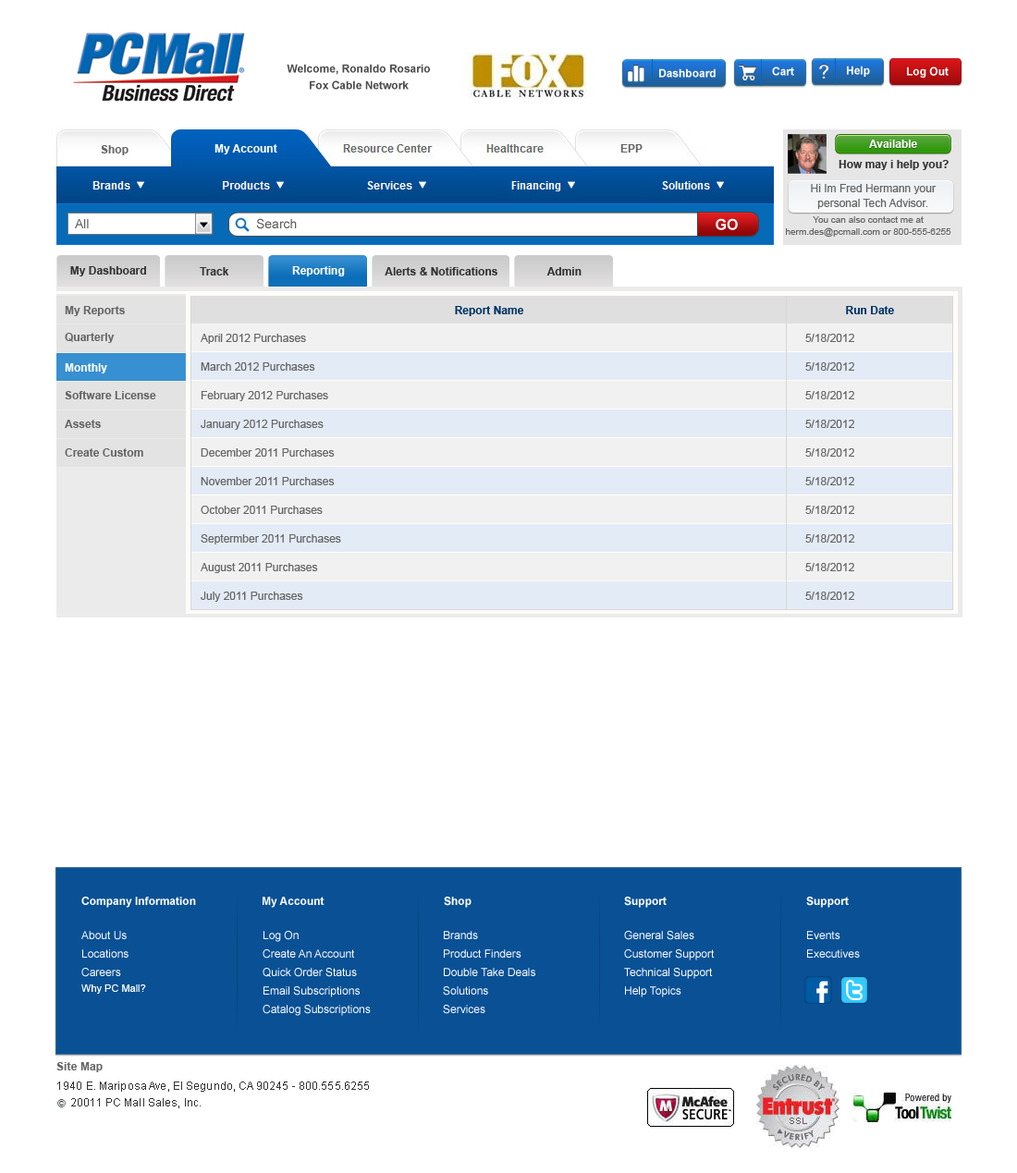
<style>
.page{position:relative;width:1017px;height:1173px;background:#ffffff}
.page>*{position:absolute;margin:0}
.t1{font:11.1px/16.6px "Arial-BoldMT";color:#4e4e4e}
.t2{font:11.1px "Arial-BoldMT";color:#feffff}
.t3{font:11.1px "Arial-BoldMT";color:#fffefe}
.t4{font:11.1px "Arial-BoldMT";color:#333333}
.t5{font:11.1px/14.8px "ArialMT";color:#666666}
.t6{font:12.9px "ArialMT";color:#625f5f}
.t7{font:14.8px "Arial-BoldMT";color:#ffffff}
.t8{font:9.2px/12px "ArialMT";color:#666666}
.t9{font:11.1px "Arial-BoldMT";color:#ffffff}
.t10{font:11.1px "Arial-BoldMT";color:#003366}
.t11{font:11.1px "ArialMT";color:#666666}
.t12{font:11.1px/18.5px "ArialMT";color:#ffffff}
.t13{font:10.2px "ArialMT";color:#ffffff}
.t14{font:11.1px "Arial-BoldMT";letter-spacing:0.01em;color:#666666}
.t15{font:11.1px "ArialMT";letter-spacing:0.01em;color:#333333}
</style>
<div class="page">
<p class="t1" style="left:287px;top:64px;width:143px;height:26px;text-align:center">Welcome, Ronaldo Rosario <br>Fox Cable Network</p>
<p class="t2" style="left:847px;top:66px;width:23px;height:11px">Help</p>
<p class="t2" style="left:659px;top:68px;width:56px;height:10px">Dashboard</p>
<p class="t2" style="left:772px;top:67px;width:22px;height:9px">Cart</p>
<p class="t2" style="left:907px;top:67px;width:41px;height:11px">Log Out</p>
<p class="t3" style="left:869px;top:140px;width:48px;height:8px">Available</p>
<p class="t4" style="left:838px;top:160px;width:110px;height:10px">How may i help you?</p>
<p class="t5" style="left:811px;top:184px;width:125px;height:25px;text-align:center">Hi Im Fred Hermann your personal Tech Advisor.</p>
<p class="t6" style="left:75px;top:219px;width:14px;height:9px">All</p>
<p class="t6" style="left:256px;top:218px;width:41px;height:11px">Search</p>
<p class="t7" style="left:715px;top:218px;width:23px;height:12px">GOv</p>
<p class="t8" style="left:786px;top:216px;width:165px;height:22px;text-align:center">You can also contact me at herm.des@pcmall.com or 800-555-6255</p>
<p class="t4" style="left:70px;top:266px;width:76px;height:10px">My Dashboard</p>
<p class="t4" style="left:200px;top:267px;width:29px;height:8px">Track</p>
<p class="t9" style="left:292px;top:266px;width:53px;height:10px">Reporting</p>
<p class="t4" style="left:384px;top:267px;width:113px;height:8px">Alerts &amp; Notifications</p>
<p class="t4" style="left:546px;top:267px;width:35px;height:8px">Admin</p>
<p class="t10" style="left:455px;top:306px;width:69px;height:10px">Report Name</p>
<p class="t10" style="left:846px;top:306px;width:48px;height:8px">Run Date</p>
<p class="t11" style="left:201px;top:334px;width:105px;height:10px">April 2012 Purchases</p>
<p class="t11" style="left:805px;top:334px;width:49px;height:8px">5/18/2012</p>
<p class="t11" style="left:201px;top:362px;width:114px;height:9px">March 2012 Purchases</p>
<p class="t11" style="left:805px;top:362px;width:49px;height:9px">5/18/2012</p>
<p class="t11" style="left:201px;top:391px;width:127px;height:10px">February 2012 Purchases</p>
<p class="t11" style="left:805px;top:391px;width:49px;height:8px">5/18/2012</p>
<p class="t11" style="left:201px;top:420px;width:122px;height:10px">January 2012 Purchases</p>
<p class="t11" style="left:805px;top:420px;width:49px;height:8px">5/18/2012</p>
<p class="t11" style="left:201px;top:448px;width:134px;height:9px">December 2011 Purchases</p>
<p class="t11" style="left:805px;top:448px;width:49px;height:9px">5/18/2012</p>
<p class="t11" style="left:201px;top:477px;width:134px;height:8px">November 2011 Purchases</p>
<p class="t11" style="left:805px;top:477px;width:49px;height:8px">5/18/2012</p>
<p class="t11" style="left:201px;top:506px;width:122px;height:8px">October 2011 Purchases</p>
<p class="t11" style="left:805px;top:506px;width:49px;height:8px">5/18/2012</p>
<p class="t11" style="left:201px;top:534px;width:140px;height:10px">Septermber 2011 Purchases</p>
<p class="t11" style="left:805px;top:534px;width:49px;height:9px">5/18/2012</p>
<p class="t11" style="left:201px;top:563px;width:117px;height:10px">August 2011 Purchases</p>
<p class="t11" style="left:805px;top:563px;width:49px;height:8px">5/18/2012</p>
<p class="t11" style="left:201px;top:592px;width:102px;height:10px">July 2011 Purchases</p>
<p class="t11" style="left:805px;top:592px;width:49px;height:8px">5/18/2012</p>
<p class="t9" style="left:81px;top:897px;width:115px;height:11px">Company Information</p>
<p class="t9" style="left:262px;top:897px;width:62px;height:11px">My Account</p>
<p class="t9" style="left:444px;top:897px;width:27px;height:11px">Shop</p>
<p class="t9" style="left:624px;top:897px;width:42px;height:11px">Support</p>
<p class="t9" style="left:806px;top:897px;width:42px;height:11px">Support</p>
<p class="t12" style="left:81px;top:931px;width:47px;height:46px">About Us<br>Locations<br>Careers</p>
<p class="t12" style="left:262px;top:931px;width:109px;height:85px">Log On<br>Create An Account<br>Quick Order Status<br>Email Subscriptions<br>Catalog Subscriptions</p>
<p class="t12" style="left:443px;top:931px;width:92px;height:83px">Brands<br>Product Finders<br>Double Take Deals<br>Solutions<br>Services</p>
<p class="t12" style="left:624px;top:931px;width:90px;height:66px">General Sales<br>Customer Support<br>Technical Support<br>Help Topics</p>
<p class="t12" style="left:807px;top:931px;width:53px;height:27px">Events<br>Executives</p>
<p class="t13" style="left:81px;top:984px;width:65px;height:10px">Why PC Mall?</p>
<p class="t14" style="left:56px;top:1062px;width:47px;height:10px">Site Map</p>
<p class="t15" style="left:57px;top:1081px;width:312px;height:11px">1940 E. Mariposa Ave, El Segundo, CA 90245 - 800.555.6255</p>
<p class="t15" style="left:71px;top:1098px;width:130px;height:10px">20011 PC Mall Sales, Inc.</p>
</div>
